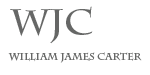
<style>
.page{position:relative;width:150px;height:75px;background:#ffffff}
.page>*{position:absolute;margin:0}
.t1{font:36px "CharlemagneStd-Bold";color:#666766}
.t2{font:10px "CharlemagneStd-Bold";color:#666766}
</style>
<div class="page">
<p class="t1" style="left:10px;top:6px;width:83px;height:38px">wjc</p>
<p class="t2" style="left:8px;top:52px;width:134px;height:11px">william james carter</p>
</div>
